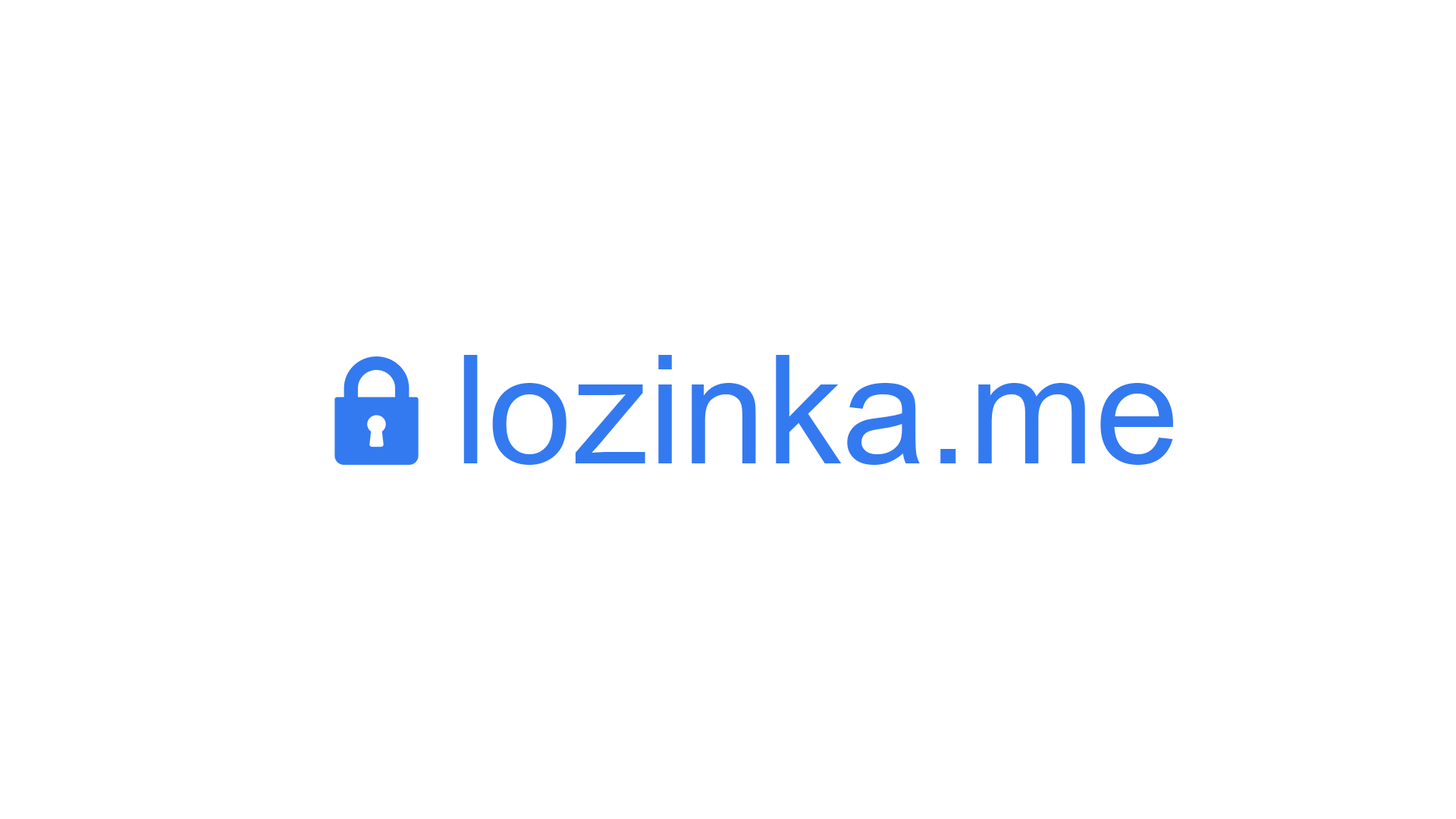
<style>
.page{position:relative;width:1456px;height:819px;background:#ffffff}
.page>*{position:absolute;margin:0}
.t1{font:151.7px "ArialMT";color:#337af0}
</style>
<div class="page">
<p class="t1" style="left:463px;top:355px;width:710px;height:110px">lozinka.me</p>
</div>
